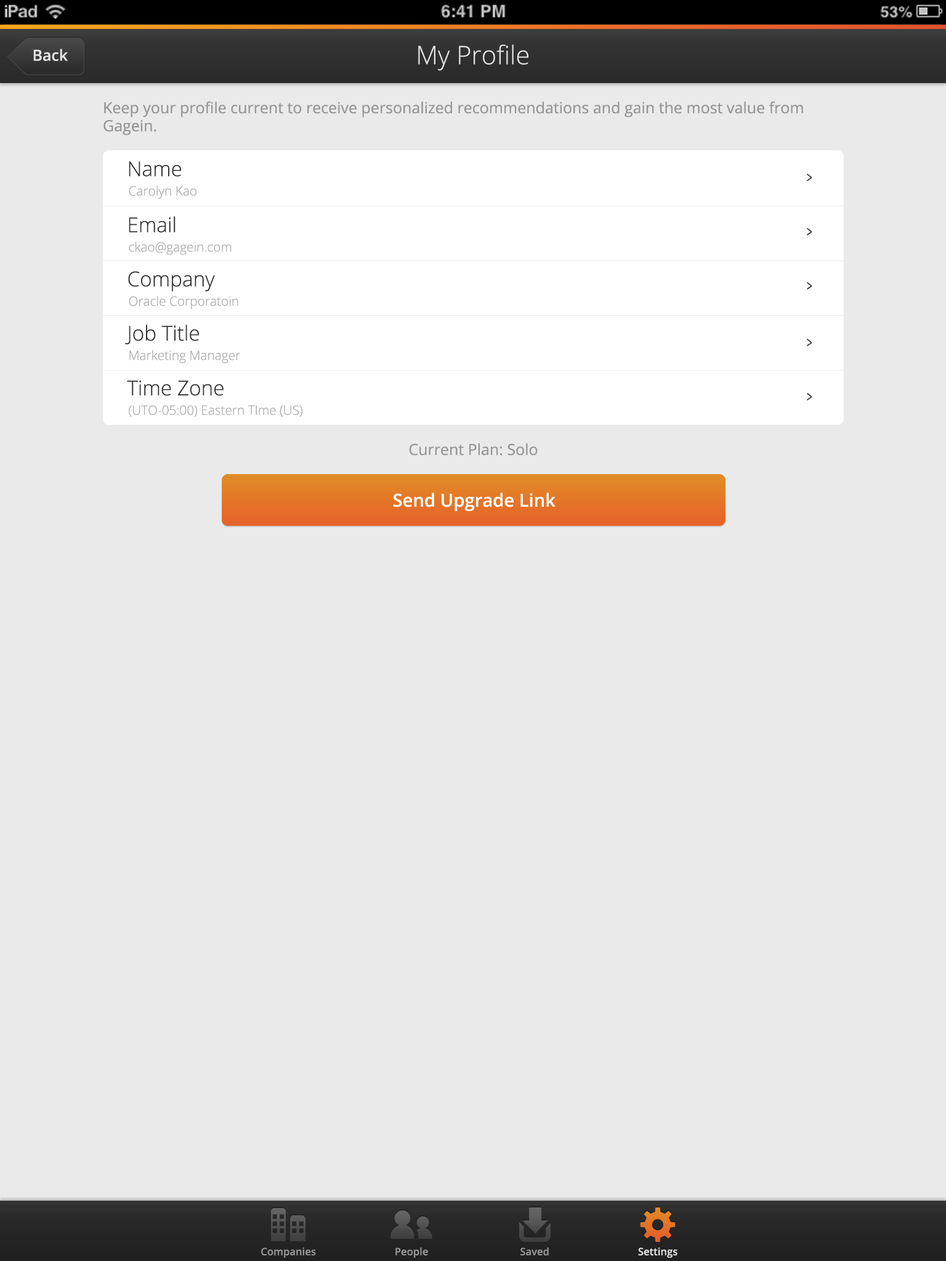
<style>
.page{position:relative;width:946px;height:1261px;background:#eaeaea}
.page>*{position:absolute;margin:0}
.t1{font:15.4px "OpenSans-Semibold";color:#e5e5e5}
.t2{font:25.7px "OpenSans-Light";color:#e5e5e5}
.t3{font:15.4px/18px "OpenSans";color:#969696}
.t4{font:20.5px "OpenSans-Light";color:#343434}
.t5{font:15.4px "OpenSans";color:#343434;scale:0.64 1}
.t6{font:12.8px "OpenSans-Light";color:#aaaaaa}
.t7{font:15.4px "OpenSans";color:#969696}
.t8{font:18px "OpenSans-Semibold";color:#ffffff}
.t9{font:10.3px "OpenSans-Semibold";color:#969696}
.t10{font:10.3px "OpenSans-Semibold";color:#e5e5e5}
</style>
<div class="page">
<p class="t1" style="left:33px;top:49px;width:35px;height:12px">Back</p>
<p class="t2" style="left:418px;top:44px;width:110px;height:27px">My Profile</p>
<p class="t3" style="left:103px;top:101px;width:700px;height:34px">Keep your profile current to receive personalized recommendations and gain the most value from Gagein.</p>
<p class="t4" style="left:129px;top:161px;width:52px;height:16px">Name</p>
<p class="t5" style="left:807px;top:174px;width:5px;height:8px">&gt;</p>
<p class="t6" style="left:129px;top:185px;width:67px;height:14px">Carolyn Kao</p>
<p class="t4" style="left:129px;top:216px;width:46px;height:17px">Email</p>
<p class="t5" style="left:807px;top:228px;width:5px;height:8px">&gt;</p>
<p class="t6" style="left:129px;top:241px;width:102px;height:14px">ckao@gagein.com</p>
<p class="t4" style="left:128px;top:271px;width:87px;height:21px">Company</p>
<p class="t5" style="left:807px;top:282px;width:5px;height:8px">&gt;</p>
<p class="t6" style="left:129px;top:296px;width:109px;height:13px">Oracle Corporatoin</p>
<p class="t4" style="left:125px;top:324px;width:74px;height:21px">Job Title</p>
<p class="t5" style="left:807px;top:339px;width:5px;height:8px">&gt;</p>
<p class="t6" style="left:129px;top:350px;width:111px;height:13px">Marketing Manager</p>
<p class="t4" style="left:127px;top:380px;width:96px;height:16px">Time Zone</p>
<p class="t5" style="left:807px;top:393px;width:5px;height:8px">&gt;</p>
<p class="t6" style="left:129px;top:405px;width:173px;height:12px">(UTO-05:00) Eastern TIme (US)</p>
<p class="t7" style="left:409px;top:443px;width:128px;height:13px">Current Plan: Solo</p>
<p class="t8" style="left:393px;top:493px;width:162px;height:18px">Send Upgrade Link</p>
<p class="t9" style="left:261px;top:1247px;width:55px;height:11px">Companies</p>
<p class="t9" style="left:395px;top:1247px;width:33px;height:11px">People</p>
<p class="t9" style="left:520px;top:1247px;width:29px;height:8px">Saved</p>
<p class="t10" style="left:638px;top:1247px;width:39px;height:11px">Settings</p>
</div>
